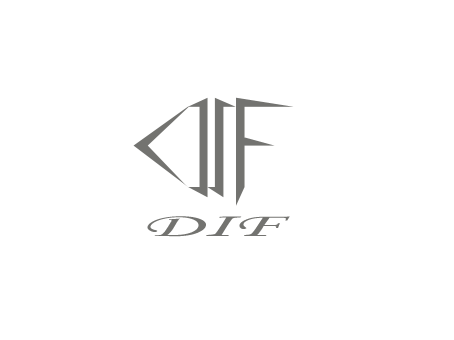
<style>
.page{position:relative;width:454px;height:340px;background:#ffffff}
.page>*{position:absolute;margin:0}
.t1{font:33.6px "MonotypeCorsiva";letter-spacing:0.02em;color:#737370;scale:2.56 1}
</style>
<div class="page">
<p class="t1" style="left:147px;top:216px;width:143px;height:21px">DIF</p>
</div>
